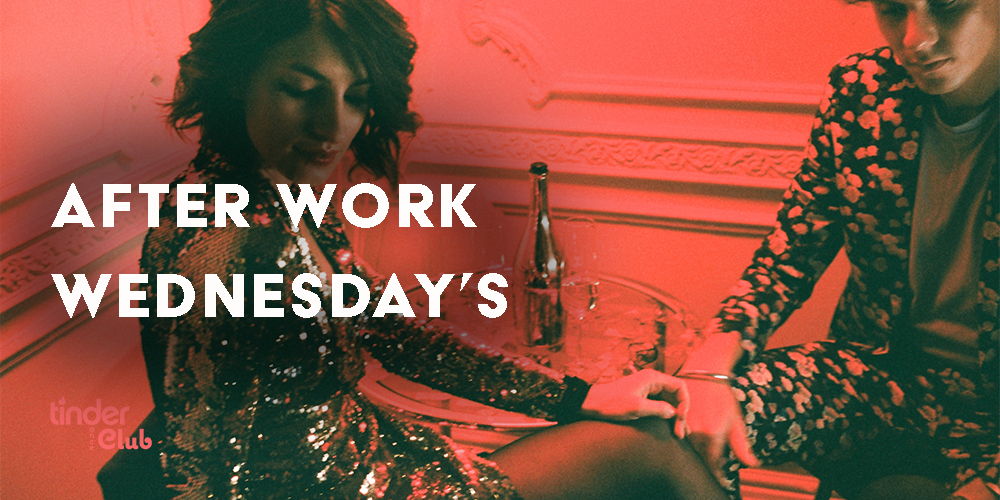
<style>
.page{position:relative;width:1000px;height:500px}
.page>*{position:absolute;margin:0}
.t1{font:72px/30px "AcierBATText-Solid";letter-spacing:0.05em;color:#fffcfc}
</style>
<div class="page">
<p class="t1" style="left:51px;top:183px;width:457px;height:135px">AFTER WORK <br><br><br>WEDNESDAY’S</p>
</div>
